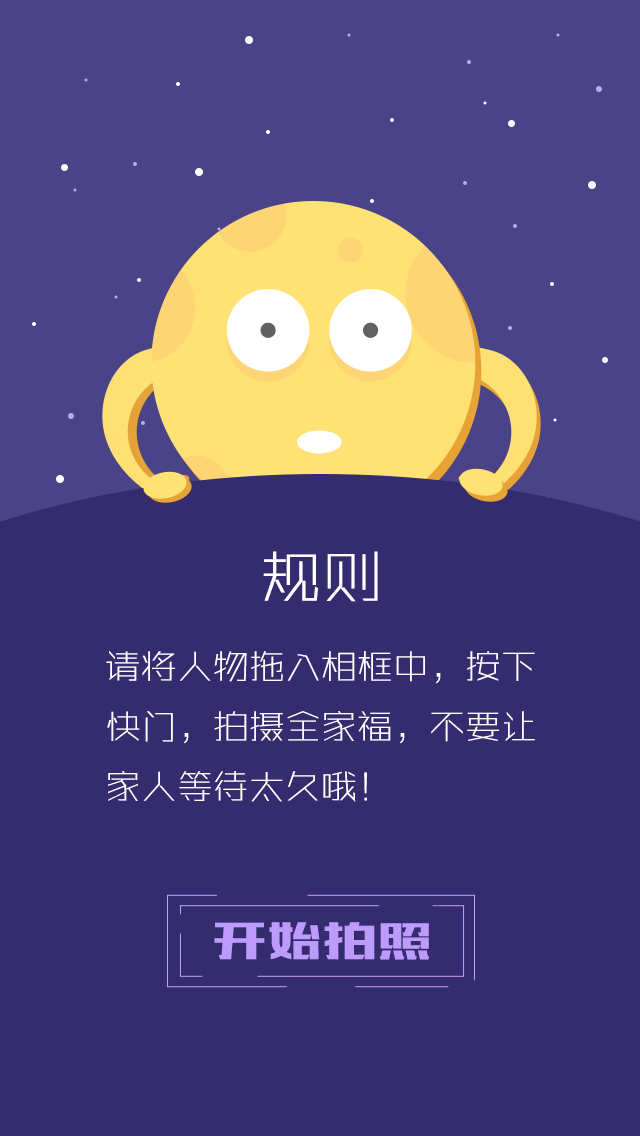
<style>
.page{position:relative;width:640px;height:1136px;background:#352c6f}
.page>*{position:absolute;margin:0}
.t1{font:60px "RuiXian";color:#ffffff;font-weight:bold}
.t2{font:36px/60px "RuiXian";color:#ffffff}
.t3{font:50px "MFBanHei_Noncommercial-Regular";letter-spacing:0.1em;color:#bc9bfc}
</style>
<div class="page">
<p class="t1" style="left:263px;top:551px;width:115px;height:51px">规则</p>
<p class="t2" style="left:106px;top:650px;width:429px;height:152px">请将人物拖入相框中，按下<br>快门，拍摄全家福，不要让<br>家人等待太久哦！</p>
<p class="t3" style="left:214px;top:922px;width:216px;height:38px">开始拍照</p>
</div>
